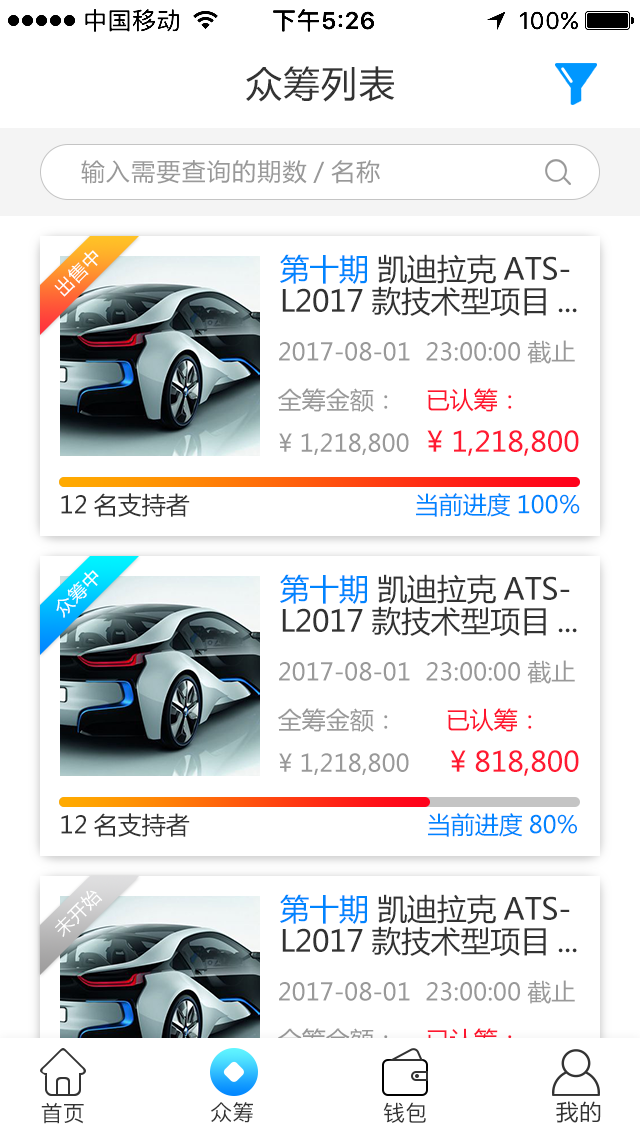
<style>
.page{position:relative;width:640px;height:1136px;background:#ffffff}
.page>*{position:absolute;margin:0}
.t1{font:36px "MicrosoftYaHei";letter-spacing:0.05em;color:#333333}
.t2{font:24px "MicrosoftYaHei";letter-spacing:0.05em;color:#999999}
.t3{font:18px "MicrosoftYaHei";letter-spacing:0.05em;color:#ffffff}
.t4{font:30px/32px "MicrosoftYaHei";letter-spacing:-0.01em;color:#333333}
.t5{font:30px/32px "MicrosoftYaHei";letter-spacing:-0.01em;color:#0085ff}
.t6{font:24px "MicrosoftYaHei";color:#999999}
.t7{font:24px "MicrosoftYaHei";color:#ff152f}
.t8{font:28px "MicrosoftYaHei";color:#ff1a32}
.t9{font:24px "MicrosoftYaHei";color:#333333}
.t10{font:24px "MicrosoftYaHei";color:#0085ff}
.t11{font:24px "MicrosoftYaHei"}
.t12{font:22px "PingFangSC-Regular";color:#333333}
.t13{font:22px "MicrosoftYaHei";letter-spacing:0.05em;color:#333333}
</style>
<div class="page">
<p class="t1" style="left:246px;top:66px;width:149px;height:36px">众筹列表</p>
<p class="t2" style="left:81px;top:160px;width:299px;height:24px">输入需要查询的期数/名称</p>
<p class="t3" style="left:54px;top:250px;width:45px;height:47px;rotate:-45deg">出售中</p>
<p class="t4" style="left:280px;top:254px;width:297px;height:63px"><span class="t5">第十期 </span>凯迪拉克ATS-<br>L2017款技术型项目...</p>
<p class="t6" style="left:279px;top:340px;width:296px;height:24px">2017-08-01  23:00:00截止</p>
<p class="t6" style="left:278px;top:388px;width:110px;height:24px">全筹金额：</p>
<p class="t7" style="left:427px;top:388px;width:85px;height:24px">已认筹：</p>
<p class="t6" style="left:279px;top:433px;width:130px;height:22px">¥ 1,218,800</p>
<p class="t8" style="left:427px;top:430px;width:152px;height:26px">¥ 1,218,800</p>
<p class="t9" style="left:61px;top:493px;width:129px;height:24px">12名支持者</p>
<p class="t10" style="left:416px;top:493px;width:164px;height:24px">当前进度100%</p>
<p class="t3" style="left:56px;top:570px;width:43px;height:48px;rotate:-45deg">众筹中</p>
<p class="t4" style="left:280px;top:574px;width:297px;height:63px"><span class="t5">第十期 </span>凯迪拉克ATS-<br>L2017款技术型项目...</p>
<p class="t6" style="left:279px;top:660px;width:296px;height:24px">2017-08-01  23:00:00截止</p>
<p class="t6" style="left:278px;top:708px;width:110px;height:24px">全筹金额：</p>
<p class="t7" style="left:447px;top:708px;width:85px;height:24px">已认筹：</p>
<p class="t8" style="left:450px;top:750px;width:129px;height:26px">¥ 818,800</p>
<p class="t6" style="left:279px;top:753px;width:130px;height:22px">¥ 1,218,800</p>
<p class="t9" style="left:61px;top:813px;width:129px;height:24px">12名支持者</p>
<p class="t10" style="left:428px;top:813px;width:149px;height:24px">当前进度80%</p>
<p class="t3" style="left:55px;top:890px;width:48px;height:47px;rotate:-45deg">未开始</p>
<p class="t4" style="left:280px;top:894px;width:297px;height:63px"><span class="t5">第十期 </span>凯迪拉克ATS-<br>L2017款技术型项目...</p>
<p class="t6" style="left:279px;top:980px;width:296px;height:24px">2017-08-01  23:00:00截止</p>
<p class="t11" style="left:278px;top:1028px;width:110px;height:24px">全筹金额：</p>
<p class="t11" style="left:427px;top:1028px;width:85px;height:24px">已认筹：</p>
<p class="t12" style="left:41px;top:1102px;width:43px;height:22px">首页</p>
<p class="t12" style="left:211px;top:1102px;width:42px;height:21px">众筹</p>
<p class="t12" style="left:383px;top:1102px;width:43px;height:21px">钱包</p>
<p class="t13" style="left:556px;top:1101px;width:45px;height:22px">我的</p>
</div>
